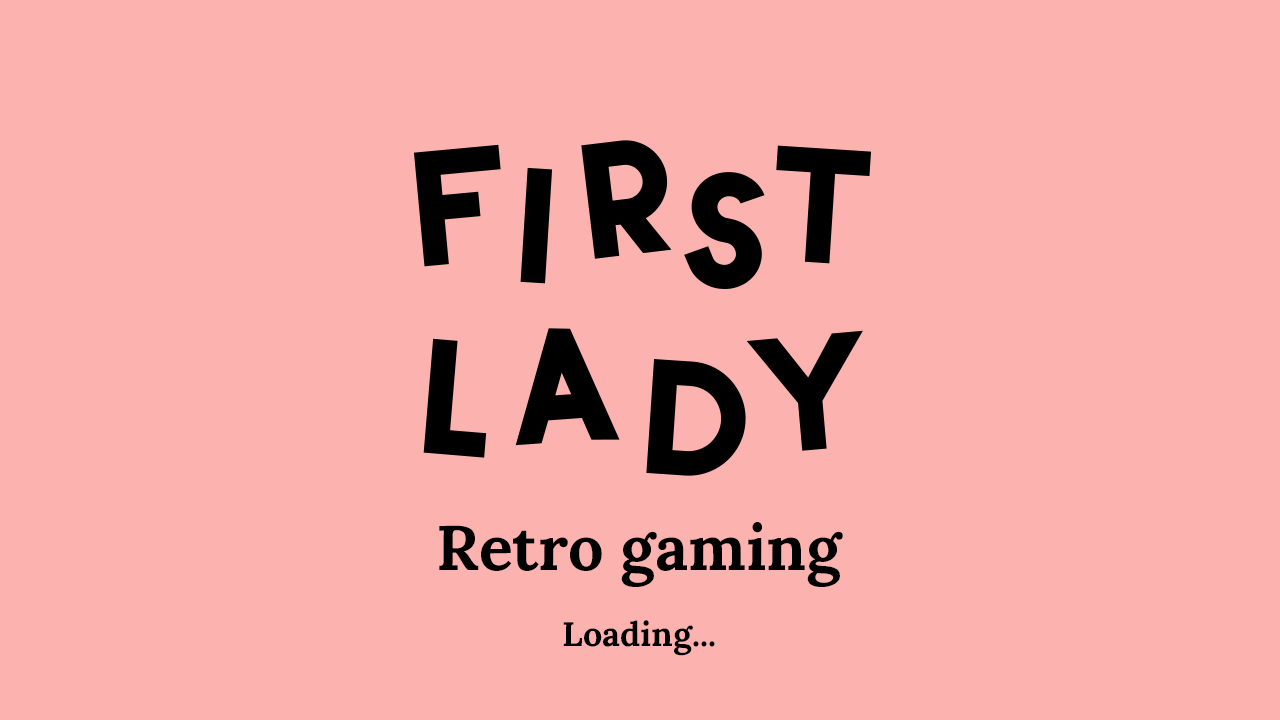
<style>
.page{position:relative;width:1280px;height:720px;background:#fcb2ae}
.page>*{position:absolute;margin:0}
.t1{font:63px "Lora-Bold";color:#000000}
.t2{font:34px "Lora-Bold";color:#000000}
</style>
<div class="page">
<p class="t1" style="left:439px;top:522px;width:404px;height:65px">Retro gaming</p>
<p class="t2" style="left:563px;top:620px;width:152px;height:36px">Loading...</p>
</div>
